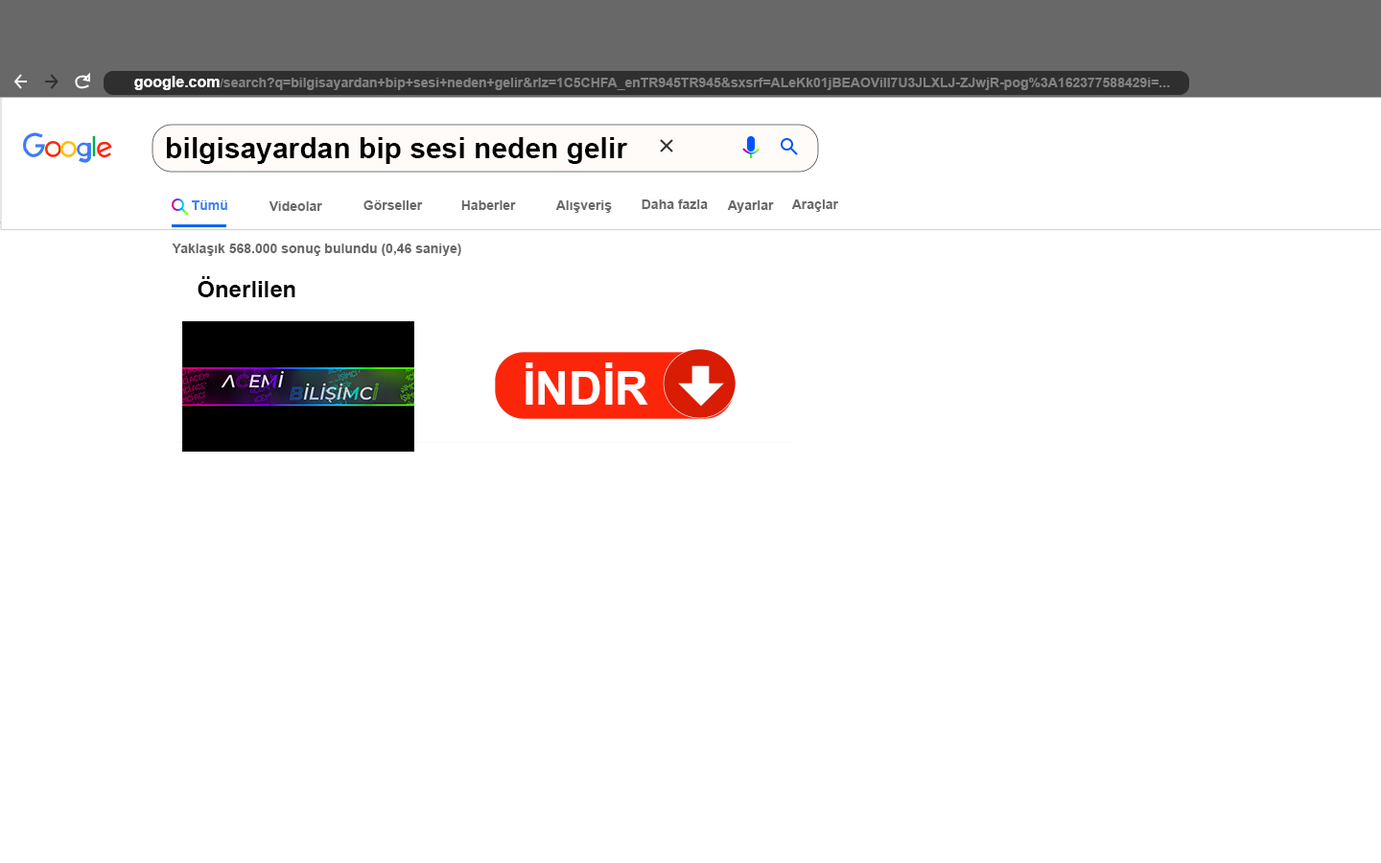
<style>
.page{position:relative;width:1381px;height:863px;background:#ffffff}
.page>*{position:absolute;margin:0}
.t1{font:13.4px "Arial-BoldMT";color:#808182}
.t2{font:15.3px "Arial-BoldMT";color:#ffffff}
.t3{font:11.5px "Arial-BoldMT";color:#808182}
.t4{font:28.8px "Arial-BoldMT";color:#000000}
.t5{font:13.4px "Arial-BoldMT";color:#3c82ee}
.t6{font:13.4px "Arial-BoldMT";color:#686869}
.t7{font:23px "Arial-BoldMT";color:#000000}
.t8{font:46px "Arial-BoldMT";color:#ffffff}
</style>
<div class="page">
<p class="t1" style="left:134px;top:76px;width:1036px;height:14px"><span class="t2">google.com</span><span class="t3">/</span>search?q=bilgisayardan+bip+sesi+neden+gelir&amp;rlz=1C5CHFA_enTR945TR945&amp;sxsrf=ALeKk01jBEAOViII7U3JLXLJ-ZJwjR-pog%3A162377588429i=...</p>
<p class="t4" style="left:167px;top:137px;width:461px;height:27px">bilgisayardan bip sesi neden gelir</p>
<p class="t5" style="left:191px;top:200px;width:36px;height:10px">Tümü</p>
<p class="t6" style="left:269px;top:201px;width:53px;height:10px">Videolar</p>
<p class="t6" style="left:364px;top:200px;width:59px;height:10px">Görseller</p>
<p class="t6" style="left:461px;top:200px;width:55px;height:10px">Haberler</p>
<p class="t6" style="left:555px;top:200px;width:57px;height:13px">Alışveriş</p>
<p class="t6" style="left:642px;top:200px;width:66px;height:9px">Daha fazla</p>
<p class="t6" style="left:727px;top:200px;width:47px;height:13px">Ayarlar</p>
<p class="t6" style="left:791px;top:200px;width:47px;height:12px">Araçlar</p>
<p class="t6" style="left:172px;top:244px;width:289px;height:12px">Yaklaşık 568.000 sonuç bulundu (0,46 saniye)</p>
<p class="t7" style="left:198px;top:276px;width:97px;height:21px">Önerlilen</p>
<p class="t8" style="left:526px;top:363px;width:122px;height:42px">İNDİR</p>
</div>
